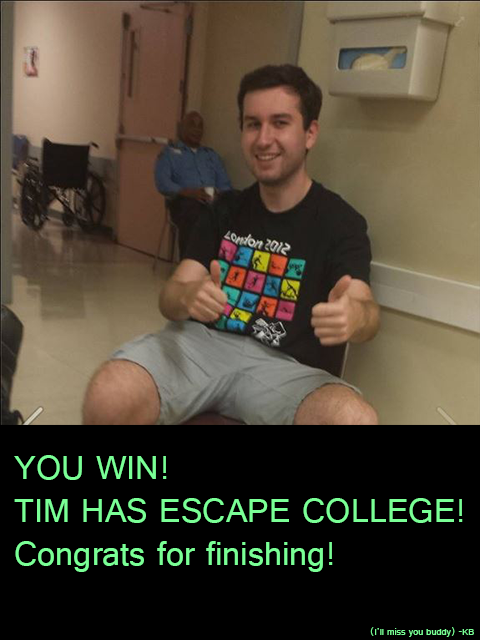
<style>
.page{position:relative;width:480px;height:640px;background:#000000}
.page>*{position:absolute;margin:0}
.t1{font:36px "Raavi";color:#7aff96}
.t2{font:10px "Raavi";color:#7aff96}
</style>
<div class="page">
<p class="t1" style="left:14px;top:455px;width:449px;height:117px">YOU WIN!<br>TIM HAS ESCAPE COLLEGE!<br>Congrats for finishing!<br><span class="t2"></span></p>
<p class="t2" style="left:370px;top:627px;width:104px;height:10px">(I’ll miss you buddy) -KB</p>
</div>
